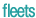
<style>
.page{position:relative;width:36px;height:18px;background:#ffffff}
.page>*{position:absolute;margin:0}
.t1{font:16.4px "GothicMB101Pro-Regular";letter-spacing:-0.08em;color:#239e9f;font-weight:bold;scale:0.77 1}
</style>
<div class="page">
<p class="t1" style="left:2px;top:3px;width:33px;height:15px">fleets</p>
</div>
